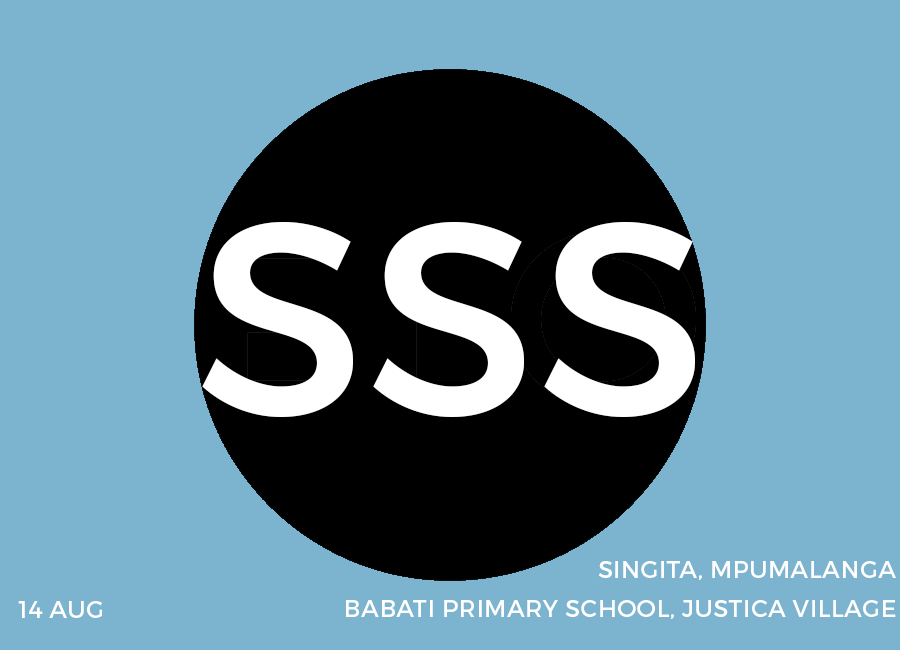
<style>
.page{position:relative;width:900px;height:650px;background:#7cb4cf}
.page>*{position:absolute;margin:0}
.t1{font:275px "Montserrat-Regular";color:#ffffff}
.t2{font:24px "Montserrat-Regular";letter-spacing:0.02em;color:#ffffff}
</style>
<div class="page">
<p class="t1" style="left:202px;top:222px;width:493px;height:195px">SSS</p>
<p class="t2" style="left:598px;top:561px;width:298px;height:19px">SINGITA, MPUMALANGA</p>
<p class="t2" style="left:18px;top:601px;width:84px;height:17px">14 AUG</p>
<p class="t2" style="left:346px;top:600px;width:550px;height:19px">BABATI PRIMARY SCHOOL, JUSTICA VILLAGE</p>
</div>
